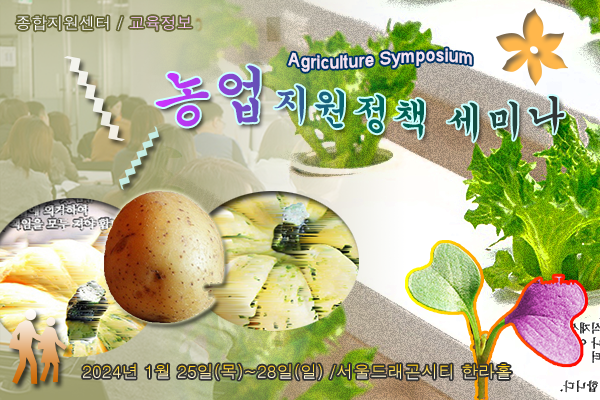
<style>
.page{position:relative;width:600px;height:400px}
.page>*{position:absolute;margin:0}
.t1{font:16px "Dotum";color:#ffffff}
.t2{font:16px "Dotum";color:#ffccff}
.t3{font:18px "ArialMT";color:#f5e5f3}
.t4{font:40px "Gungsuh"}
.t5{font:60px "Gungsuh"}
.t6{font:17px "Dotum"}
</style>
<div class="page">
<p class="t1" style="left:16px;top:16px;width:176px;height:15px">종합지원센터 / <span class="t2">교육정보</span></p>
<p class="t3" style="left:288px;top:48px;width:184px;height:24px">Agriculture Symposium</p>
<p class="t4" style="left:155px;top:65px;width:410px;height:77px"><span class="t5">농업</span>지원정책 세미나</p>
<p class="t6" style="left:83px;top:364px;width:428px;height:16px">2024년 1월 25일(목)~28일(일) /서울드래곤시티 한라홀</p>
</div>
